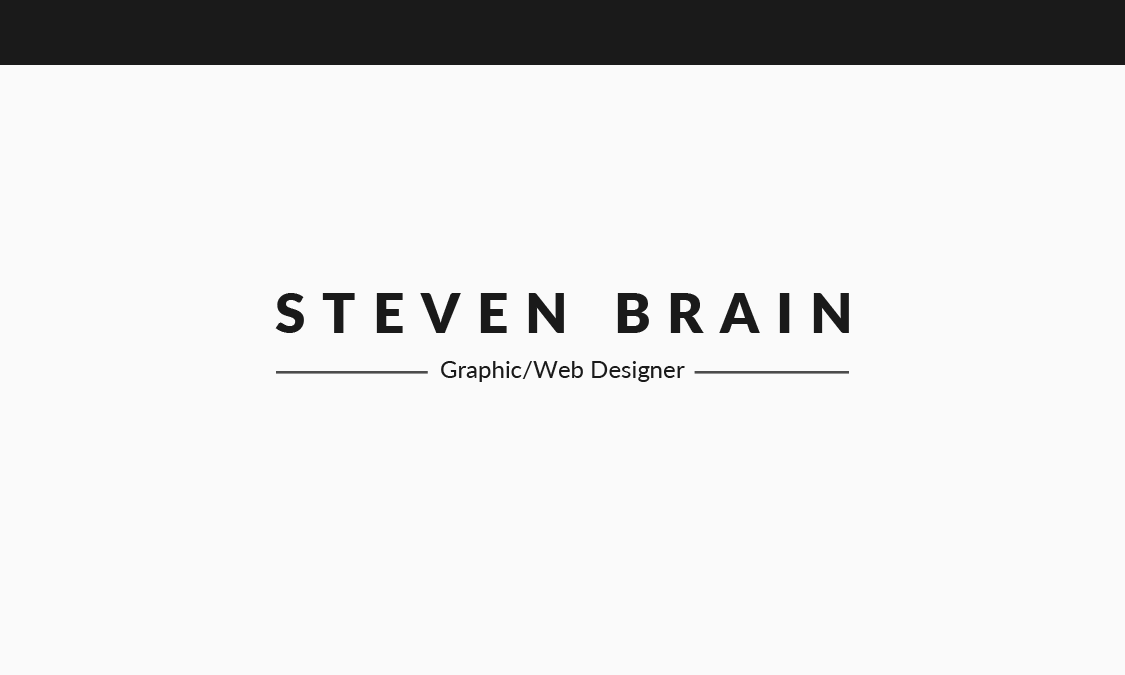
<style>
.page{position:relative;width:1125px;height:675px;background:#fafafa}
.page>*{position:absolute;margin:0}
.t1{font:55.2px "Lato-Black";letter-spacing:0.3em;color:#1a1a1a;text-transform:uppercase}
.t2{font:23.9px "Lato-Regular";color:#1a1a1a}
</style>
<div class="page">
<p class="t1" style="left:275px;top:293px;width:574px;height:40px">STEVEN BRAIN</p>
<p class="t2" style="left:441px;top:361px;width:244px;height:21px">Graphic/Web Designer</p>
</div>
